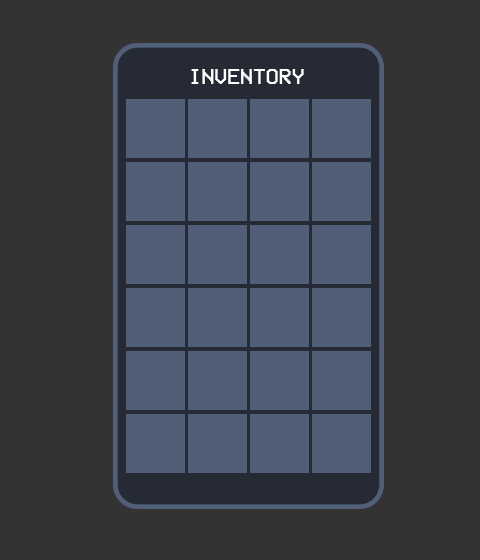
<style>
.page{position:relative;width:480px;height:560px;background:#333333}
.page>*{position:absolute;margin:0}
.t1{font:22px "VCROSDMono";color:#ffffff}
</style>
<div class="page">
<p class="t1" style="left:191px;top:69px;width:113px;height:15px">INVENTORY</p>
</div>
